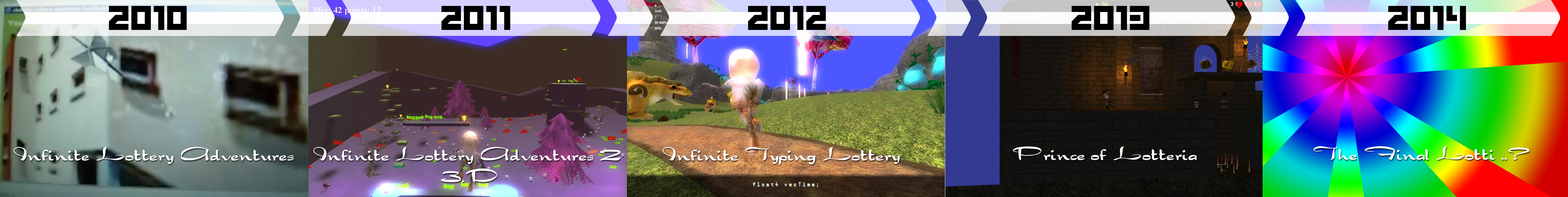
<style>
.page{position:relative;width:1568px;height:197px}
.page>*{position:absolute;margin:0}
.t1{font:37.3px "GrappleBRK";color:#000000}
.t2{font:17.9px "Dragonwick";color:#ffffff}
</style>
<div class="page">
<p class="t1" style="left:109px;top:6px;width:78px;height:24px">2010</p>
<p class="t1" style="left:441px;top:6px;width:69px;height:24px">2011</p>
<p class="t1" style="left:748px;top:6px;width:78px;height:24px">2012</p>
<p class="t1" style="left:1071px;top:6px;width:78px;height:24px">2013</p>
<p class="t1" style="left:1388px;top:6px;width:78px;height:24px">2014</p>
<p class="t2" style="left:14px;top:147px;width:280px;height:17px">Infinite Lottery Adventures</p>
<p class="t2" style="left:313px;top:147px;width:308px;height:35px;text-align:center">Infinite Lottery Adventures 2 <br>3.D</p>
<p class="t2" style="left:663px;top:147px;width:237px;height:17px">Infinite Typing Lottery</p>
<p class="t2" style="left:1013px;top:146px;width:184px;height:14px">Prince of Lotteria</p>
<p class="t2" style="left:1313px;top:146px;width:216px;height:14px">The Final Lotti ..?</p>
</div>
